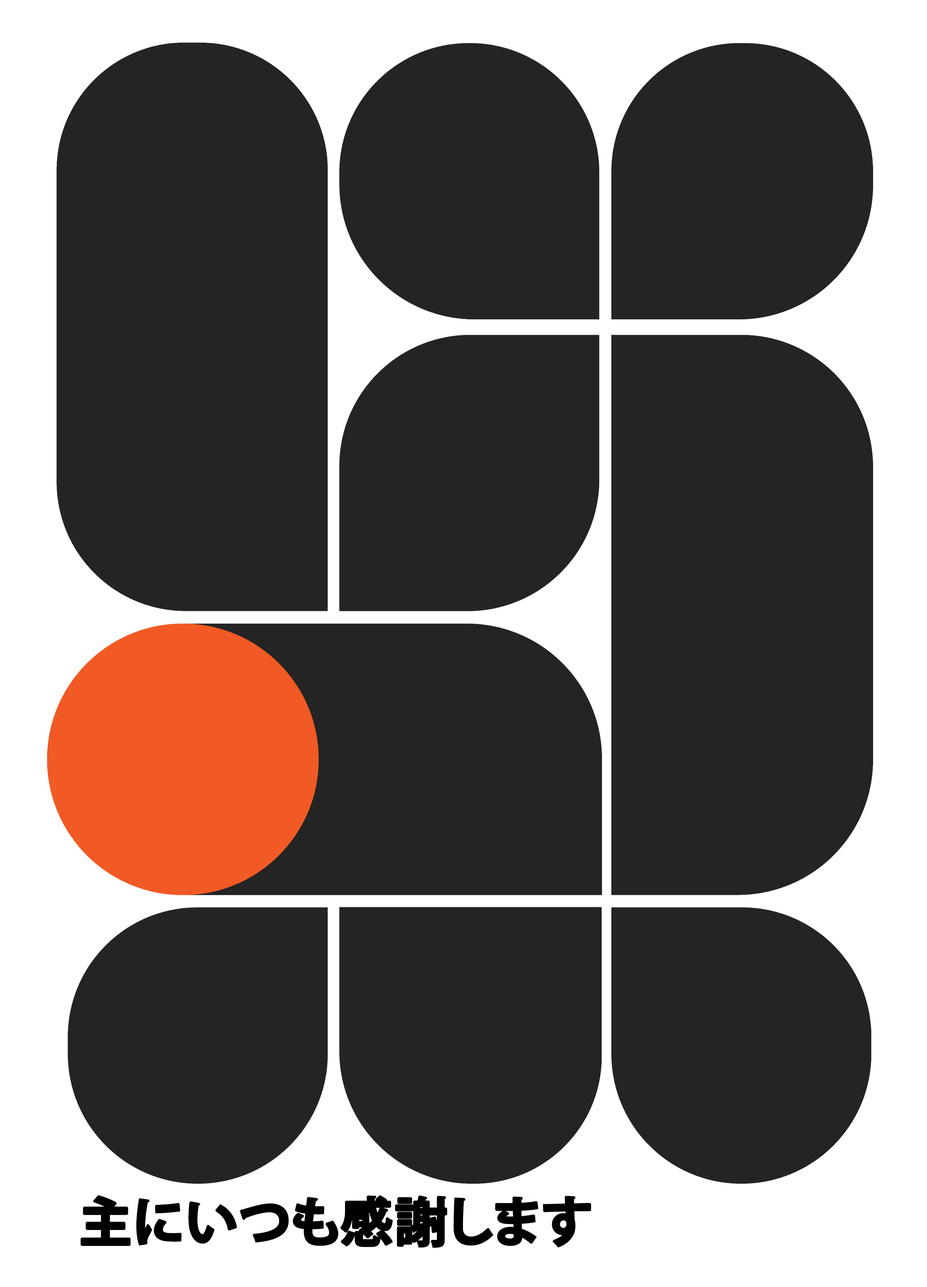
<style>
.page{position:relative;width:927px;height:1287px;background:#242424}
.page>*{position:absolute;margin:0}
.t1{font:53px "KozGoPr6N-Bold";color:#000000;font-weight:bold}
</style>
<div class="page">
<p class="t1" style="left:80px;top:1195px;width:511px;height:53px">主にいつも感謝します</p>
</div>
